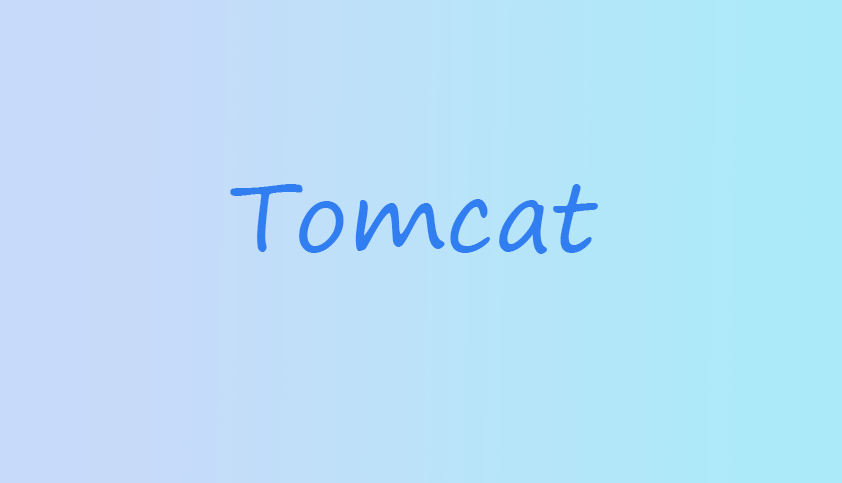
<style>
.page{position:relative;width:842px;height:483px}
.page>*{position:absolute;margin:0}
.t1{font:96px "SegoePrint";color:#317ef1}
</style>
<div class="page">
<p class="t1" style="left:230px;top:184px;width:368px;height:70px">Tomcat</p>
</div>
